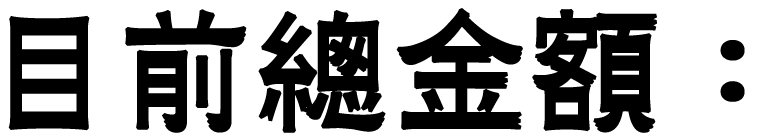
<style>
.page{position:relative;width:762px;height:140px;background:#ffffff}
.page>*{position:absolute;margin:0}
.t1{font:133.3px "DFChiLi-W5-WIN-BF";color:#000000;font-weight:bold}
</style>
<div class="page">
<p class="t1" style="left:8px;top:8px;width:737px;height:125px">目前總金額：</p>
</div>
